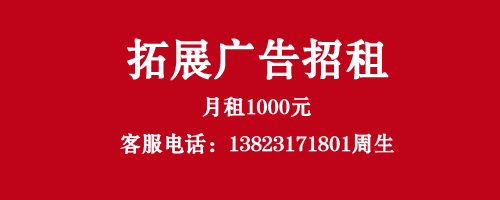
<style>
.page{position:relative;width:500px;height:200px;background:#bf0319}
.page>*{position:absolute;margin:0}
.t1{font:42.9px "FZSHJW--GB1-0";color:#ffffff;font-weight:bold}
.t2{font:21.3px "FZSHJW--GB1-0";color:#ffffff;font-weight:bold}
</style>
<div class="page">
<p class="t1" style="left:127px;top:38px;width:262px;height:43px">拓展广告招租</p>
<p class="t2" style="left:202px;top:96px;width:109px;height:21px">月租1000元</p>
<p class="t2" style="left:120px;top:133px;width:274px;height:22px">客服电话：13823171801周生</p>
</div>
